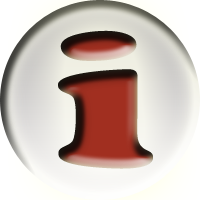
<style>
.page{position:relative;width:200px;height:200px}
.page>*{position:absolute;margin:0}
.t1{font:192.5px "CooperBlackStd";scale:1.4 1}
</style>
<div class="page">
<p class="t1" style="left:58px;top:30px;width:95px;height:139px;rotate:3deg">i</p>
</div>
